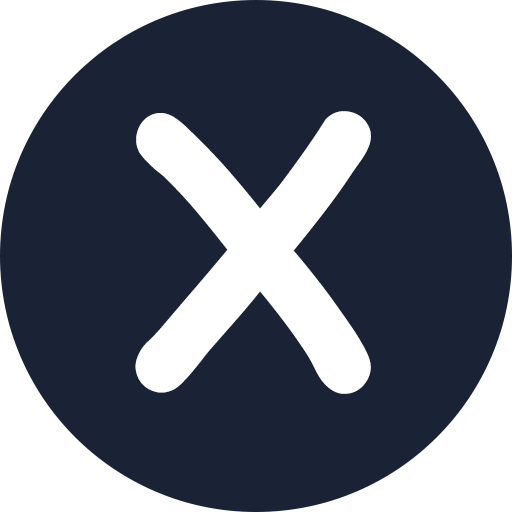
<style>
.page{position:relative;width:512px;height:512px;background:#1a2236}
.page>*{position:absolute;margin:0}
.t1{font:381.9px "Chalkboard-Bold";color:#ffffff}
</style>
<div class="page">
<p class="t1" style="left:135px;top:111px;width:236px;height:283px">X</p>
</div>
